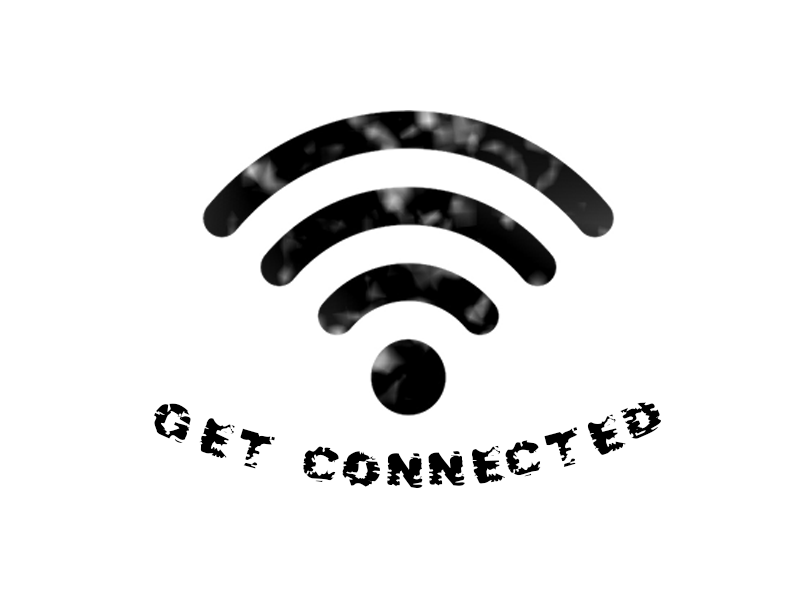
<style>
.page{position:relative;width:800px;height:600px;background:#ffffff}
.page>*{position:absolute;margin:0}
.t1{font:43.3px "AfterShok";color:#000000}
</style>
<div class="page">
<p class="t1" style="left:153px;top:402px;width:509px;height:87px;text-align:right">Get Connected</p>
</div>
